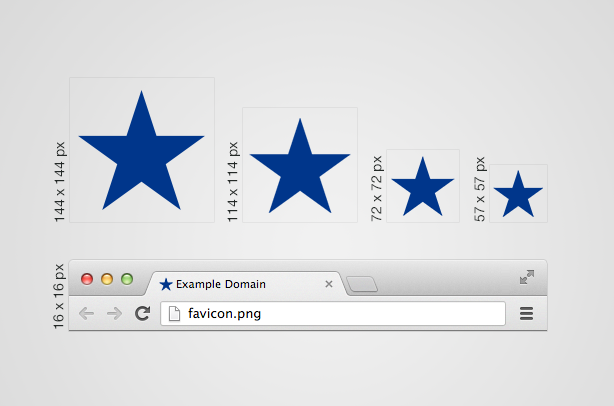
<style>
.page{position:relative;width:614px;height:406px}
.page>*{position:absolute;margin:0}
.t1{font:14px "HelveticaNeueLT-Roman";color:#242927}
</style>
<div class="page">
<p class="t1" style="left:54px;top:141px;width:13px;height:81px;rotate:-90deg">144 x 144 px</p>
<p class="t1" style="left:227px;top:141px;width:13px;height:81px;rotate:-90deg">114 x 114 px</p>
<p class="t1" style="left:371px;top:155px;width:13px;height:67px;rotate:-90deg">72 x 72 px</p>
<p class="t1" style="left:474px;top:156px;width:13px;height:66px;rotate:-90deg">57 x 57 px</p>
<p class="t1" style="left:53px;top:263px;width:13px;height:66px;rotate:-90deg">16 x 16 px</p>
</div>
